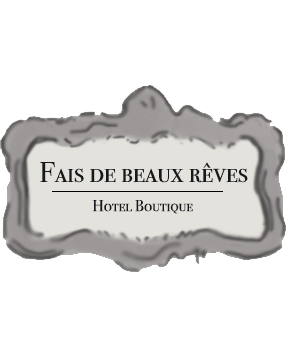
<style>
.page{position:relative;width:297px;height:343px;background:#ffffff}
.page>*{position:absolute;margin:0}
.t1{font:28.3px "BodoniSvtyTwoSCITCTT-Book";color:#16181c}
.t2{font:16px "BodoniSvtyTwoSCITCTT-Book";color:#16181c}
</style>
<div class="page">
<p class="t1" style="left:40px;top:162px;width:208px;height:21px">Fais de beaux rêves</p>
<p class="t2" style="left:92px;top:200px;width:101px;height:14px">Hotel Boutique</p>
</div>
